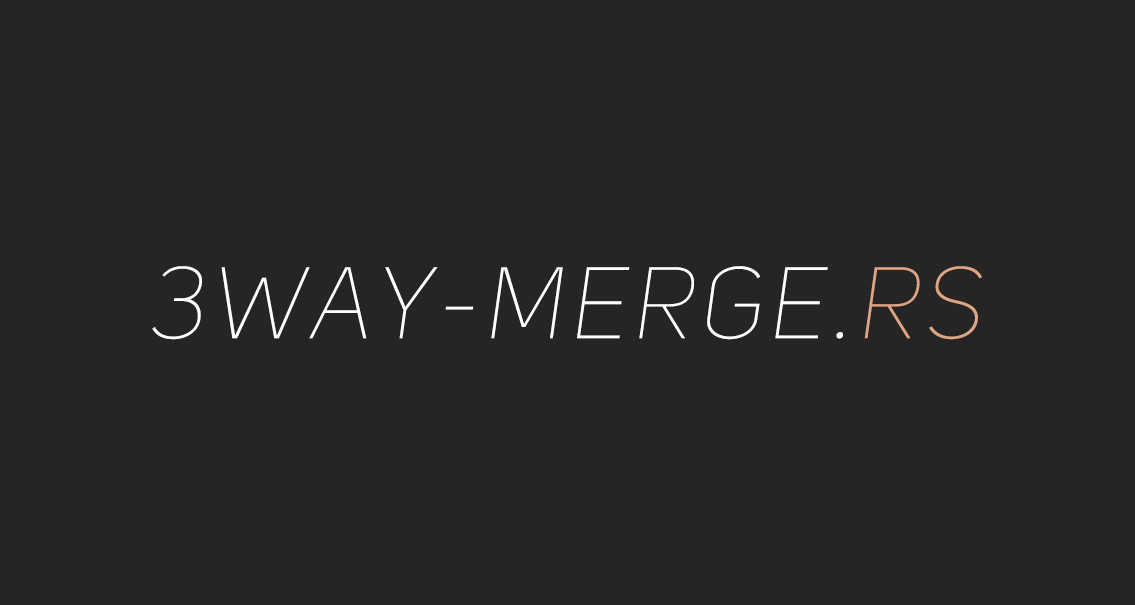
<style>
.page{position:relative;width:1135px;height:605px;background:#252525}
.page>*{position:absolute;margin:0}
.t1{font:100px "UniSansThinItalicCAPS";letter-spacing:0.06em;color:#ffffff}
.t2{font:100px "UniSansThinItalicCAPS";letter-spacing:0.06em;color:#dea584}
</style>
<div class="page">
<p class="t1" style="left:152px;top:266px;width:830px;height:74px">3way-merge.<span class="t2">rs</span></p>
</div>
